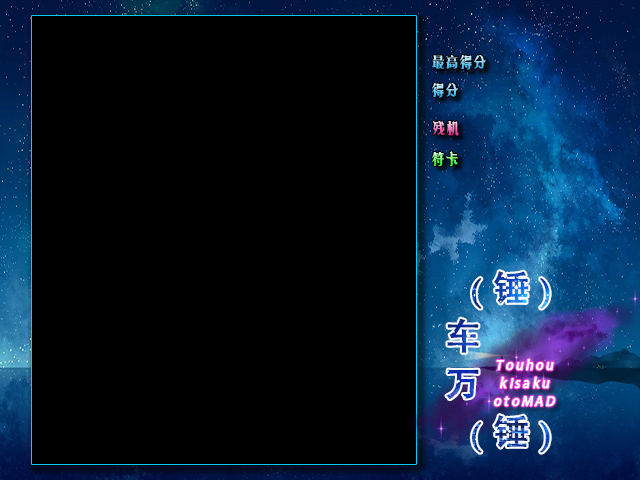
<style>
.page{position:relative;width:640px;height:480px;background:#000000}
.page>*{position:absolute;margin:0}
.t1{font:14px "MFMiaoMiao_Noncommercial-Regular";letter-spacing:0.15em;font-weight:bold}
.t2{font:13px/18px "AdobeHeitiStd-Regular";letter-spacing:0.15em;color:#ffffff;font-weight:bold;font-style:italic}
</style>
<div class="page">
<p class="t1" style="left:432px;top:55px;width:54px;height:15px">最高得分</p>
<p class="t1" style="left:432px;top:83px;width:26px;height:15px">得分</p>
<p class="t1" style="left:433px;top:121px;width:26px;height:15px">残机</p>
<p class="t1" style="left:432px;top:151px;width:26px;height:15px">符卡</p>
<p class="t2" style="left:494px;top:358px;width:62px;height:49px;text-align:center">Touhou<br>kisaku<br>otoMAD</p>
</div>
